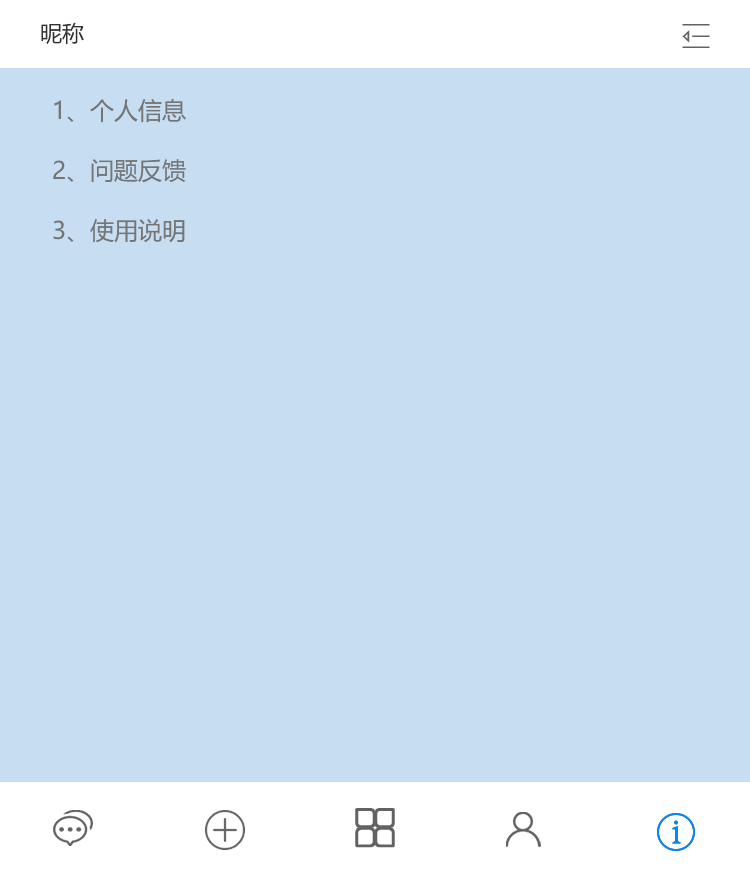
<style>
.page{position:relative;width:750px;height:880px;background:#c7def2}
.page>*{position:absolute;margin:0}
.t1{font:22px "MicrosoftYaHei";color:#323232;text-transform:uppercase}
.t2{font:24px/60px "MicrosoftYaHei";color:#757575;text-transform:uppercase}
</style>
<div class="page">
<p class="t1" style="left:41px;top:22px;width:43px;height:22px">昵称</p>
<p class="t2" style="left:53px;top:99px;width:133px;height:144px">1、个人信息<br>2、问题反馈<br>3、使用说明</p>
</div>
